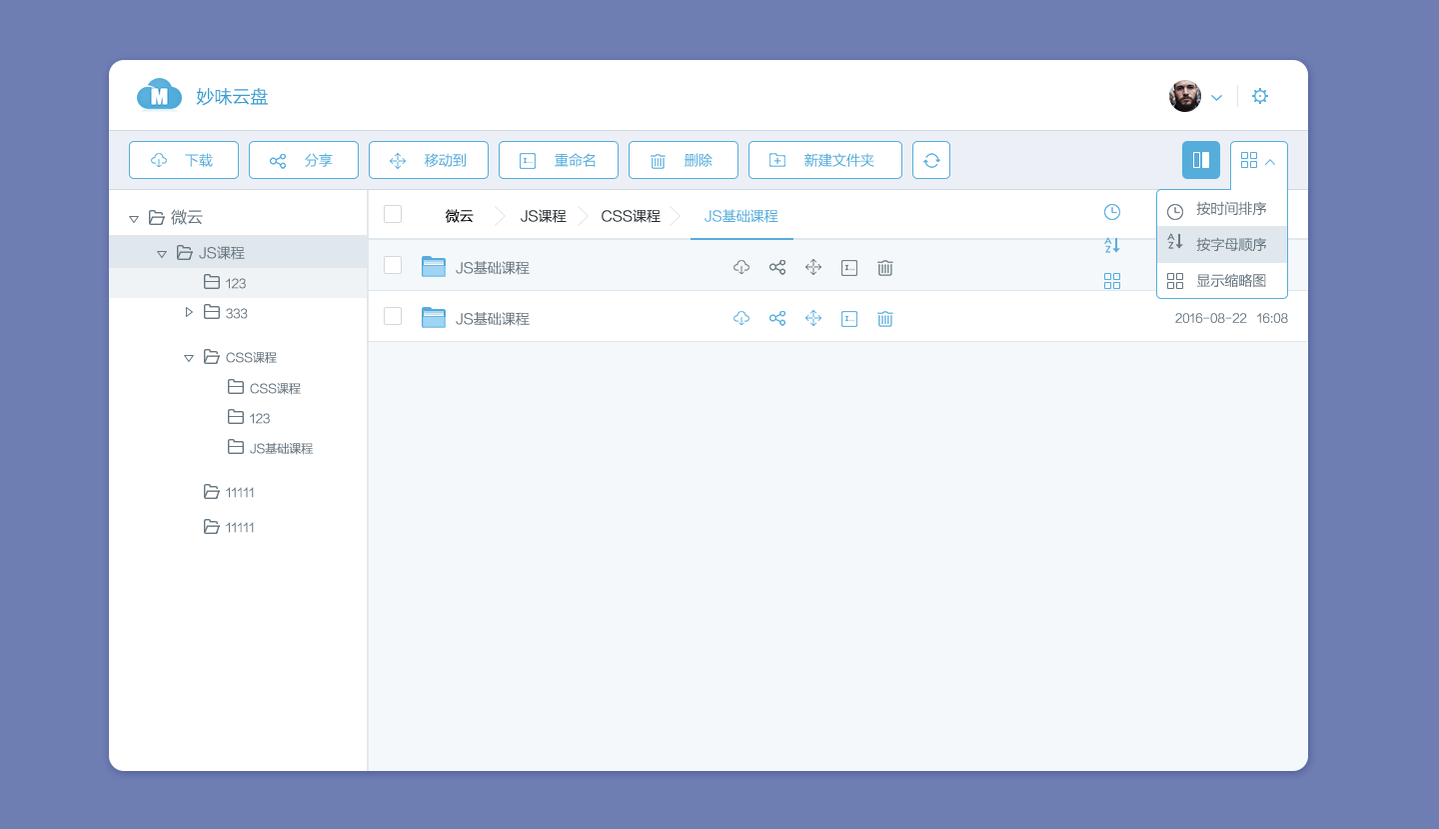
<style>
.page{position:relative;width:1439px;height:829px;background:#f5f8fa}
.page>*{position:absolute;margin:0}
.t1{font:18px "FZLTXHK--GBK1-0";color:#389cd1}
.t2{font:14px "FZLTXHK--GBK1-0";color:#55addc}
.t3{font:16px "FZLTXHK--GBK1-0";color:#66757f}
.t4{font:14px "FZLTXHK--GBK1-0";color:#000000}
.t5{font:14px "FZLTXHK--GBK1-0";color:#2a3133}
.t6{font:14px/36px "FZLTXHK--GBK1-0";color:#66757f}
.t7{font:14px "FZLTXHK--GBK1-0";color:#66757f}
.t8{font:12px "FZLTXHK--GBK1-0";color:#66757f}
</style>
<div class="page">
<p class="t1" style="left:196px;top:88px;width:72px;height:18px">妙味云盘</p>
<p class="t2" style="left:185px;top:153px;width:28px;height:14px">下载</p>
<p class="t2" style="left:305px;top:153px;width:28px;height:14px">分享</p>
<p class="t2" style="left:425px;top:153px;width:41px;height:14px">移动到</p>
<p class="t2" style="left:555px;top:153px;width:41px;height:14px">重命名</p>
<p class="t2" style="left:685px;top:153px;width:28px;height:14px">删除</p>
<p class="t2" style="left:805px;top:153px;width:70px;height:14px">新建文件夹</p>
<p class="t3" style="left:171px;top:209px;width:32px;height:16px">微云</p>
<p class="t4" style="left:446px;top:209px;width:28px;height:14px">微云</p>
<p class="t5" style="left:521px;top:209px;width:140px;height:14px">JS课程         CSS课程</p>
<p class="t2" style="left:705px;top:209px;width:74px;height:14px">JS基础课程</p>
<p class="t6" style="left:1196px;top:201px;width:70px;height:86px">按时间排序<br>按字母顺序<br>显示缩略图</p>
<p class="t7" style="left:199px;top:246px;width:46px;height:14px">JS课程</p>
<p class="t7" style="left:456px;top:261px;width:74px;height:14px">JS基础课程</p>
<p class="t8" style="left:226px;top:278px;width:20px;height:11px">123</p>
<p class="t8" style="left:226px;top:308px;width:22px;height:11px">333</p>
<p class="t7" style="left:456px;top:312px;width:74px;height:14px">JS基础课程</p>
<p class="t8" style="left:1175px;top:313px;width:113px;height:10px">2016-08-22   16:08</p>
<p class="t8" style="left:226px;top:352px;width:51px;height:12px">CSS课程</p>
<p class="t8" style="left:250px;top:383px;width:51px;height:12px">CSS课程</p>
<p class="t8" style="left:250px;top:413px;width:20px;height:11px">123</p>
<p class="t8" style="left:250px;top:442px;width:64px;height:13px">JS基础课程</p>
<p class="t8" style="left:226px;top:487px;width:28px;height:11px">11111</p>
<p class="t8" style="left:226px;top:522px;width:28px;height:11px">11111</p>
</div>
